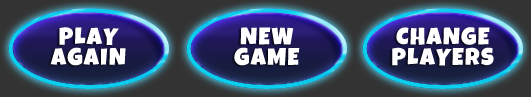
<style>
.page{position:relative;width:531px;height:97px}
.page>*{position:absolute;margin:0}
.t1{font:24px/20.6px "LuckiestGuy-Regular";letter-spacing:0.06em;color:#ffffff;text-transform:uppercase}
</style>
<div class="page">
<p class="t1" style="left:50px;top:27px;width:76px;height:39px;text-align:center">PLAY<br>AGAIN</p>
<p class="t1" style="left:234px;top:27px;width:66px;height:39px;text-align:center">NEW<br>GAME</p>
<p class="t1" style="left:392px;top:27px;width:102px;height:39px;text-align:center">CHANGE<br>PLAYERS</p>
</div>
